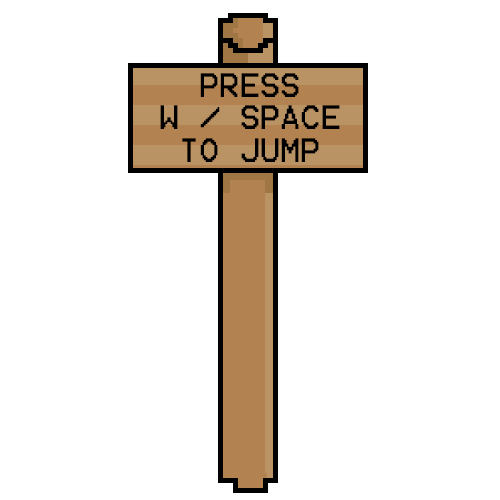
<style>
.page{position:relative;width:500px;height:500px;background:#ffffff}
.page>*{position:absolute;margin:0}
.t1{font:27px "Terminal";color:#000000}
</style>
<div class="page">
<p class="t1" style="left:160px;top:73px;width:180px;height:89px;text-align:center">PRESS <br>W / SPACE<br>TO JUMP</p>
</div>
